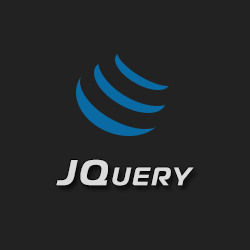
<style>
.page{position:relative;width:250px;height:250px;background:#222222}
.page>*{position:absolute;margin:0}
.t1{font:36px "Magistral-BoldItalic";letter-spacing:0.075em;color:#f1f1f1;font-variant:small-caps}
</style>
<div class="page">
<p class="t1" style="left:56px;top:159px;width:138px;height:27px">JQuery</p>
</div>
